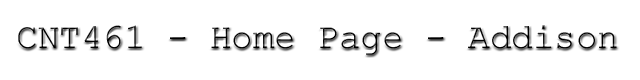
<style>
.page{position:relative;width:640px;height:80px;background:#ffffff}
.page>*{position:absolute;margin:0}
.t1{font:35.9px "CourierNewPSMT";color:#000000}
</style>
<div class="page">
<p class="t1" style="left:18px;top:25px;width:599px;height:30px">CNT461 - Home Page - Addison</p>
</div>
